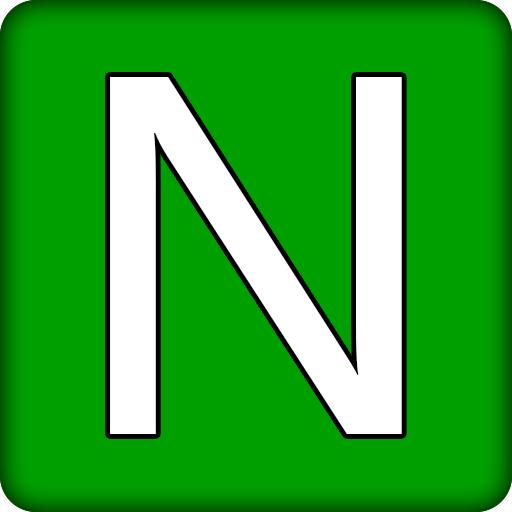
<style>
.page{position:relative;width:512px;height:512px;background:#009f00}
.page>*{position:absolute;margin:0}
.t1{font:472.4px "MicrosoftYaHei";color:#ffffff}
</style>
<div class="page">
<p class="t1" style="left:110px;top:77px;width:292px;height:357px">N</p>
</div>
